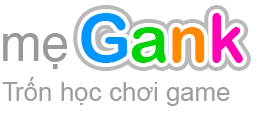
<style>
.page{position:relative;width:269px;height:118px;background:#ffffff}
.page>*{position:absolute;margin:0}
.t1{font:67px "ArialRoundedMTBold";color:#0096ff}
.t2{font:67px "ArialRoundedMTBold";color:#00d305}
.t3{font:67px "ArialRoundedMTBold";color:#ff8a00}
.t4{font:67px "ArialRoundedMTBold";color:#ff00b4}
.t5{font:50px "Helvetica";color:#999999}
.t6{font:26px "ArialMT";color:#9d9d9d}
</style>
<div class="page">
<p class="t1" style="left:81px;top:13px;width:162px;height:50px">G<span class="t2">a</span><span class="t3">n</span><span class="t4">k</span></p>
<p class="t5" style="left:3px;top:33px;width:64px;height:36px">mẹ</p>
<p class="t6" style="left:2px;top:77px;width:228px;height:29px">Trốn học chơi game</p>
</div>
